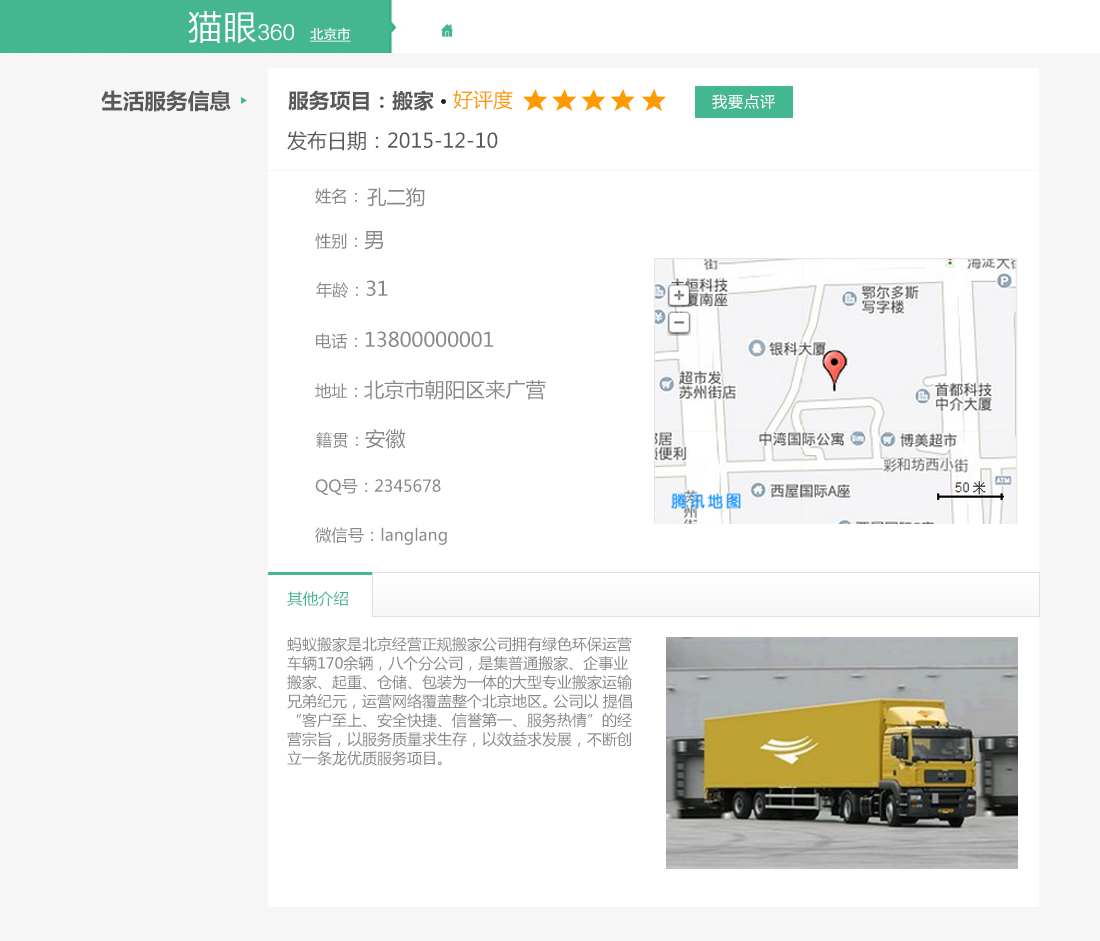
<style>
.page{position:relative;width:1100px;height:941px;background:#ffffff}
.page>*{position:absolute;margin:0}
.t1{font:19.9px "FZLTXHK--GBK1-0";color:#ffffff;font-weight:bold}
.t2{font:34px "FZLTXHK--GBK1-0";color:#ffffff;font-weight:bold}
.t3{font:12.6px "FZLTXHK--GBK1-0";color:#ffffff;font-weight:bold;text-decoration:underline;scale:1.04 1}
.t4{font:21.6px "MicrosoftYaHei-Bold";color:#595959}
.t5{font:20.5px "MicrosoftYaHei-Bold";color:#595959}
.t6{font:20px "MicrosoftYaHei";color:#ff9b02}
.t7{font:15.3px "MicrosoftYaHei";letter-spacing:0.05em;color:#ffffff}
.t8{font:20px "MicrosoftYaHei";color:#595959}
.t9{font:16.2px "MicrosoftYaHei";color:#878787}
.t10{font:20px "MicrosoftYaHei";color:#888888}
.t11{font:16.2px "MicrosoftYaHei";color:#888888}
.t12{font:15.3px "MicrosoftYaHei";color:#44b790}
.t13{font:15px/19px "MicrosoftYaHei";color:#888888}
</style>
<div class="page">
<p class="t1" style="left:188px;top:11px;width:106px;height:32px"><span class="t2">猫眼</span>360</p>
<p class="t3" style="left:310px;top:27px;width:41px;height:15px">北京市</p>
<p class="t4" style="left:101px;top:90px;width:130px;height:22px">生活服务信息</p>
<p class="t5" style="left:288px;top:90px;width:146px;height:21px">服务项目：搬家</p>
<p class="t6" style="left:453px;top:90px;width:60px;height:20px">好评度</p>
<p class="t7" style="left:712px;top:94px;width:63px;height:15px">我要点评</p>
<p class="t8" style="left:287px;top:131px;width:211px;height:20px">发布日期：2015-12-10</p>
<p class="t9" style="left:315px;top:188px;width:42px;height:16px">姓名：</p>
<p class="t10" style="left:367px;top:187px;width:58px;height:20px">孔二狗</p>
<p class="t11" style="left:315px;top:231px;width:68px;height:19px">性别：<span class="t10">男</span></p>
<p class="t11" style="left:316px;top:280px;width:72px;height:18px">年龄：<span class="t10">31</span></p>
<p class="t10" style="left:316px;top:331px;width:178px;height:18px"><span class="t11">电话：</span>13800000001</p>
<p class="t10" style="left:315px;top:379px;width:231px;height:21px"><span class="t11">地址：</span>北京市朝阳区来广营</p>
<p class="t11" style="left:316px;top:429px;width:90px;height:20px">籍贯：<span class="t10">安徽</span></p>
<p class="t11" style="left:315px;top:479px;width:126px;height:16px">QQ号：2345678</p>
<p class="t11" style="left:315px;top:527px;width:132px;height:18px">微信号：langlang</p>
<p class="t12" style="left:287px;top:591px;width:61px;height:16px">其他介绍</p>
<p class="t13" style="left:287px;top:636px;width:345px;height:130px">蚂蚁搬家是北京经营正规搬家公司拥有绿色环保运营<br>车辆170余辆，八个分公司，是集普通搬家、企事业<br>搬家、起重、仓储、包装为一体的大型专业搬家运输<br>兄弟纪元，运营网络覆盖整个北京地区。公司以 提倡<br>“客户至上、安全快捷、信誉第一、服务热情”的经<br>营宗旨，以服务质量求生存，以效益求发展，不断创<br>立一条龙优质服务项目。</p>
</div>
